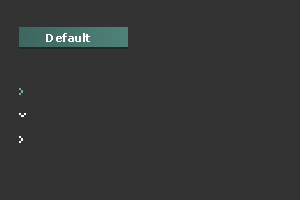
<style>
.page{position:relative;width:300px;height:200px;background:#333333}
.page>*{position:absolute;margin:0}
.t1{font:11px "Verdana-Bold";color:#fffcfc}
</style>
<div class="page">
<p class="t1" style="left:46px;top:33px;width:44px;height:9px">Default</p>
</div>
